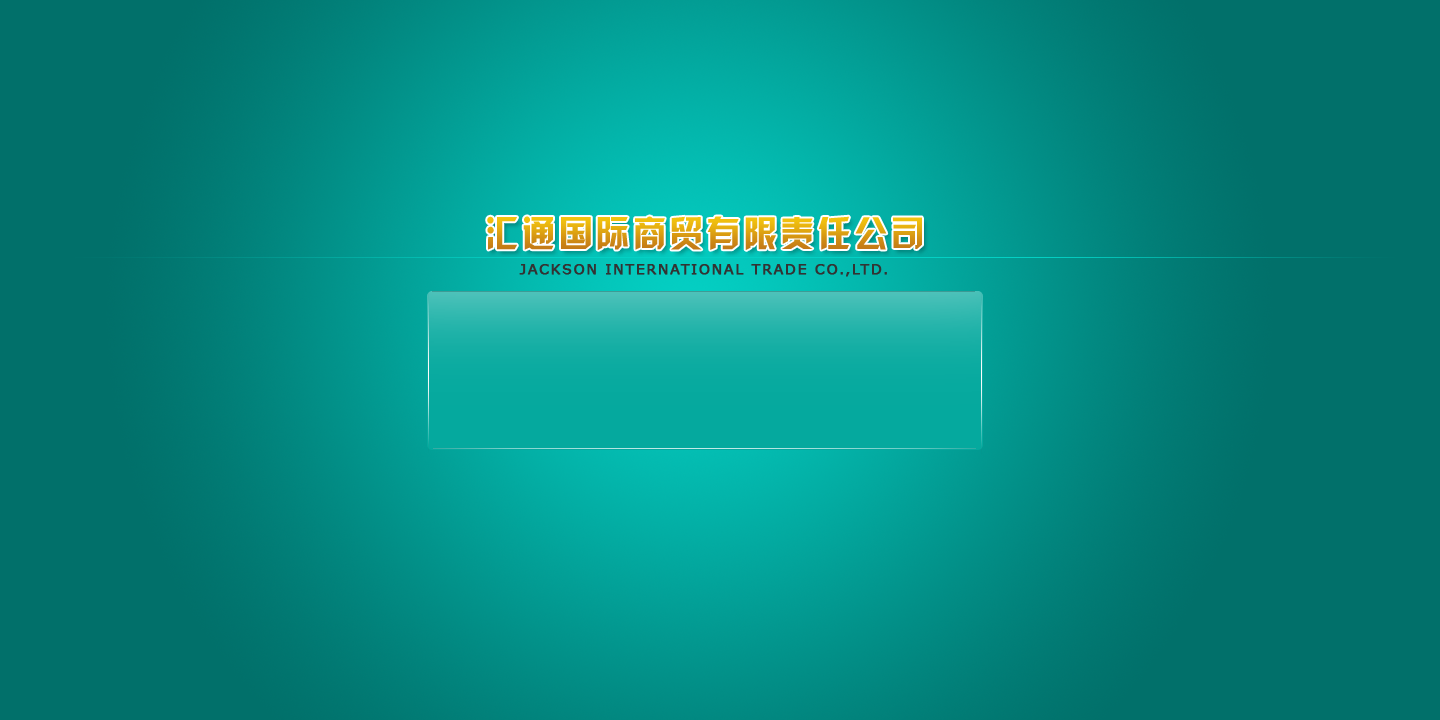
<style>
.page{position:relative;width:1440px;height:720px;background:#01706a}
.page>*{position:absolute;margin:0}
.t1{font:36px "HYk2gj";letter-spacing:0.1em;scale:0.93 1}
.t2{font:14px "Verdana";letter-spacing:0.1em;color:#333333;font-weight:bold}
</style>
<div class="page">
<p class="t1" style="left:487px;top:216px;width:435px;height:34px">汇通国际商贸有限责任公司</p>
<p class="t2" style="left:519px;top:264px;width:368px;height:13px">JACKSON INTERNATIONAL TRADE CO.,LTD.</p>
</div>
